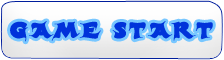
<style>
.page{position:relative;width:224px;height:60px}
.page>*{position:absolute;margin:0}
.t1{font:22px "Candles";letter-spacing:0.1em;color:#0033da}
</style>
<div class="page">
<p class="t1" style="left:10px;top:21px;width:203px;height:21px">GAME START</p>
</div>
